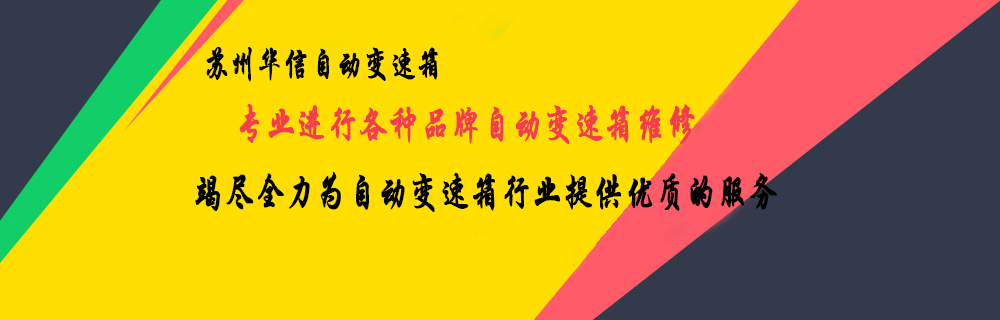
<style>
.page{position:relative;width:1000px;height:320px;background:#ffde00}
.page>*{position:absolute;margin:0}
.t1{font:36.4px "STXingkai";color:#000000;font-weight:bold;scale:0.71 1}
.t2{font:42px "STXingkai";color:#f63d4d;font-weight:bold;scale:0.71 1}
.t3{font:42px "STXingkai";color:#000000;font-weight:bold;scale:0.71 1}
</style>
<div class="page">
<p class="t1" style="left:206px;top:47px;width:232px;height:35px">苏州华信自动变速箱</p>
<p class="t2" style="left:239px;top:104px;width:456px;height:40px">专业进行各种品牌自动变速箱维修</p>
<p class="t3" style="left:195px;top:172px;width:582px;height:40px">竭尽全力为自动变速箱行业提供优质的服务</p>
</div>
